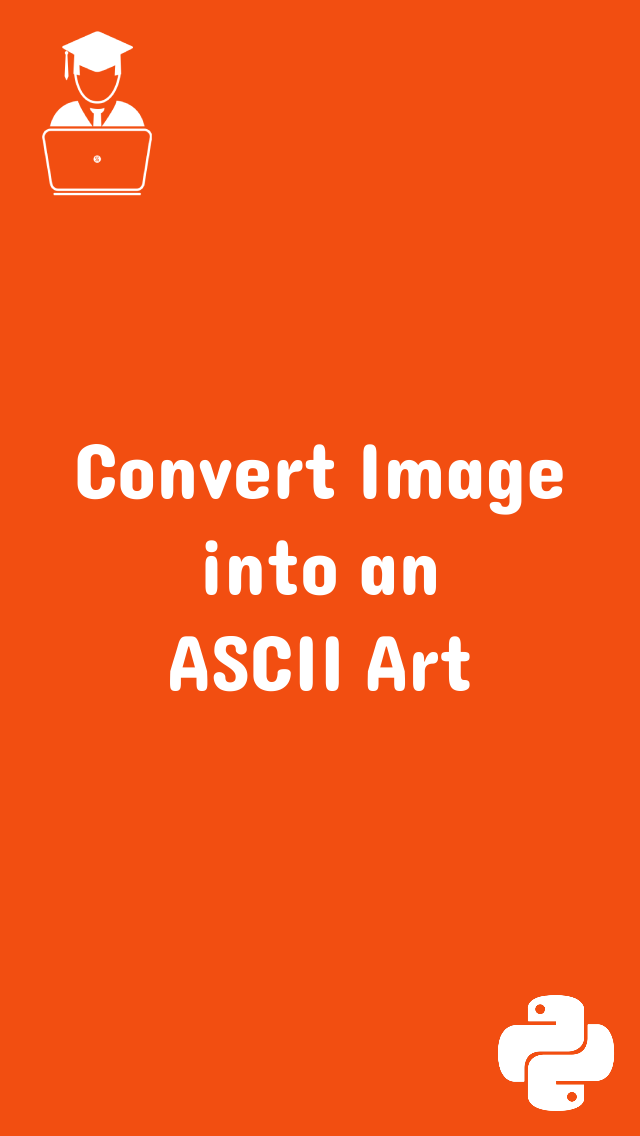
<style>
.page{position:relative;width:640px;height:1136px;background:#f24e11}
.page>*{position:absolute;margin:0}
.t1{font:80px "Dangrek-Regular";color:#ffffff}
</style>
<div class="page">
<p class="t1" style="left:77px;top:444px;width:486px;height:248px;text-align:center">Convert Image<br>into an<br>ASCII Art</p>
</div>
